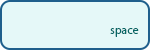
<style>
.page{position:relative;width:150px;height:50px;background:#e5f8f8}
.page>*{position:absolute;margin:0}
.t1{font:12px "MyriadPro-Regular";color:#066665}
</style>
<div class="page">
<p class="t1" style="left:110px;top:28px;width:29px;height:9px">space</p>
</div>
